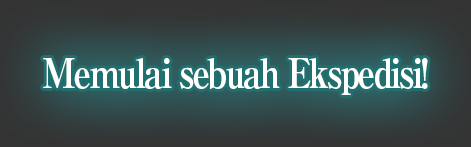
<style>
.page{position:relative;width:471px;height:147px}
.page>*{position:absolute;margin:0}
.t1{font:40px "RyuminPro-ExBold";letter-spacing:-0.08em;color:#ffffff;scale:0.9 1}
</style>
<div class="page">
<p class="t1" style="left:43px;top:58px;width:385px;height:37px">Memulai sebuah Ekspedisi!</p>
</div>
